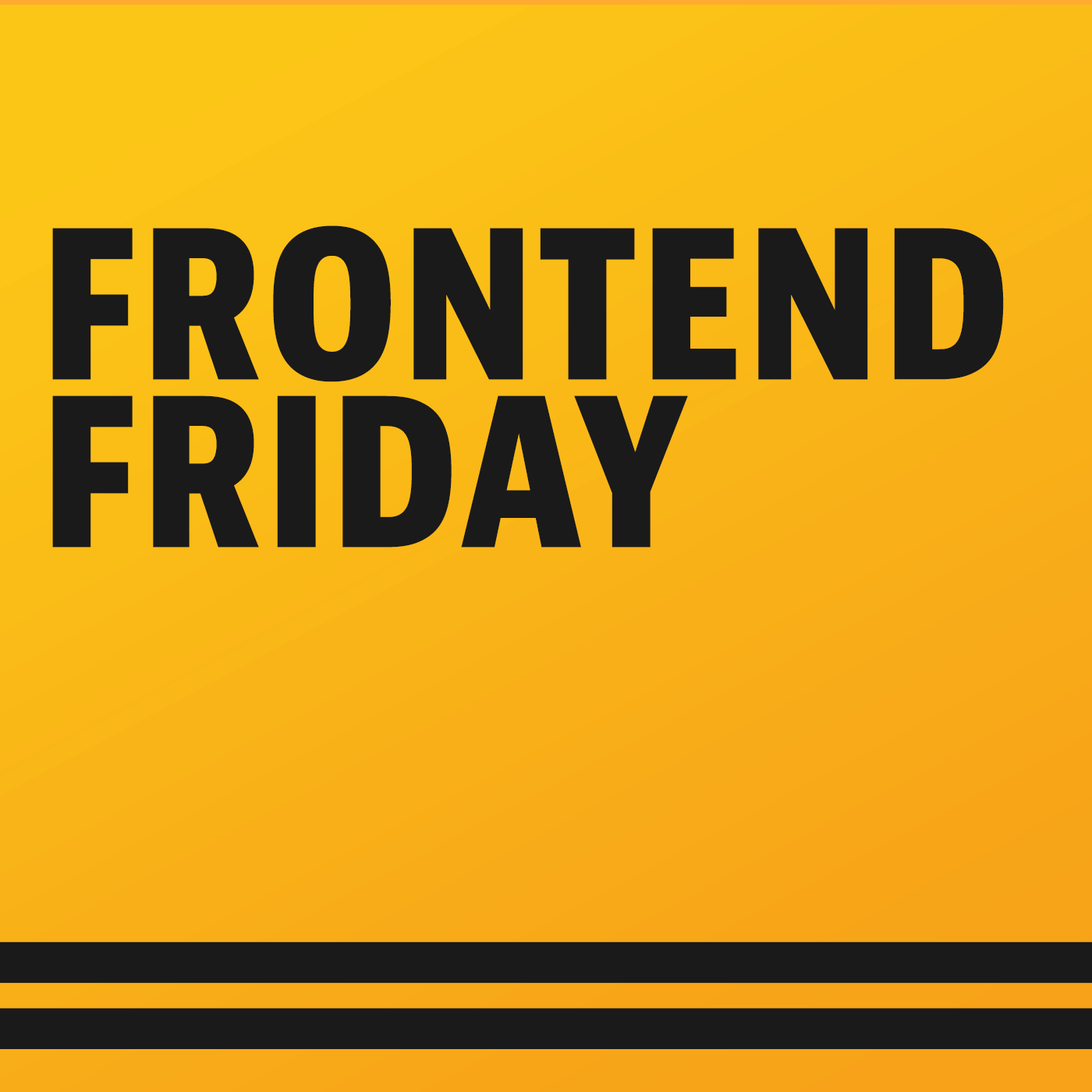
<style>
.page{position:relative;width:1092px;height:1092px}
.page>*{position:absolute;margin:0}
.t1{font:219.6px/167.8px "BerninoSans-CondensedExtrabold";color:#1a1a1b;text-transform:uppercase}
</style>
<div class="page">
<p class="t1" style="left:52px;top:225px;width:952px;height:323px">Frontend<br>Friday</p>
</div>
